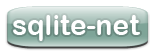
<style>
.page{position:relative;width:153px;height:55px;background:#ffffff}
.page>*{position:absolute;margin:0}
.t1{font:28px "ArialRoundedMTBold";color:#ffffff}
</style>
<div class="page">
<p class="t1" style="left:13px;top:15px;width:127px;height:26px">sqlite-net</p>
</div>
